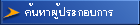
<style>
.page{position:relative;width:140px;height:25px}
.page>*{position:absolute;margin:0}
.t1{font:15.3px "EucrosiaDSE";color:#ffffff;scale:1.12 1}
</style>
<div class="page">
<p class="t1" style="left:25px;top:3px;width:88px;height:16px">¤é¹ËÒ¼Ùé»ÃÐ¡Íº¡ÒÃ</p>
</div>
